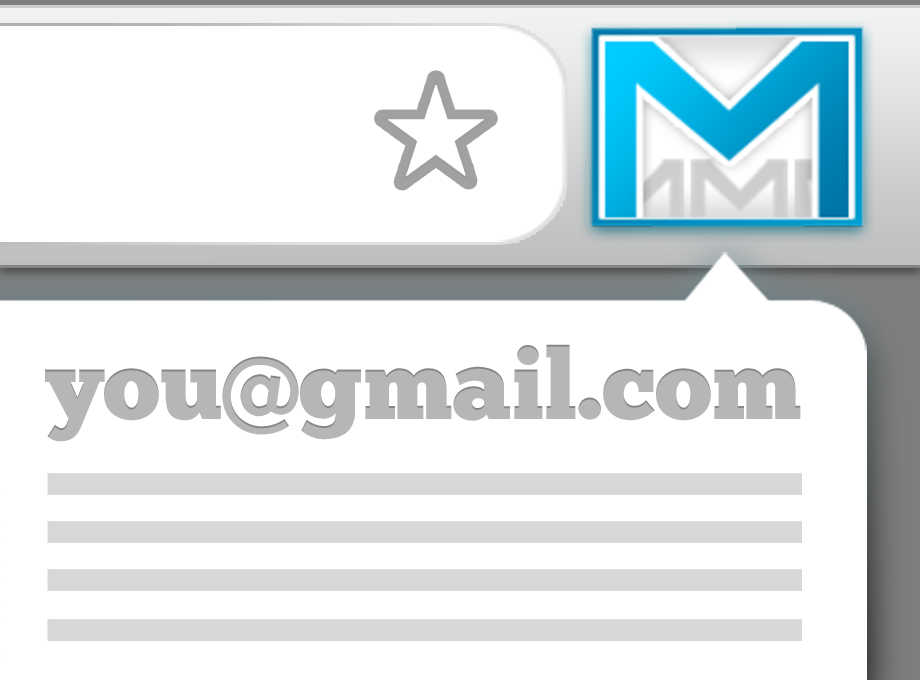
<style>
.page{position:relative;width:920px;height:680px;background:#ffffff}
.page>*{position:absolute;margin:0}
.t1{font:99px "ChunkFive";color:#b7b6b6}
</style>
<div class="page">
<p class="t1" style="left:45px;top:344px;width:756px;height:98px">you@gmail.com</p>
</div>
